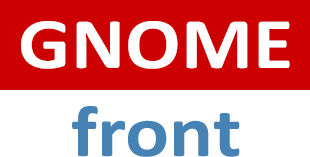
<style>
.page{position:relative;width:310px;height:157px;background:#ffffff}
.page>*{position:absolute;margin:0}
.t1{font:73.3px "Calibri-Bold";color:#ffffff;scale:1.12 1}
.t2{font:73.3px "Calibri-Bold";color:#4682b4;scale:1.12 1}
</style>
<div class="page">
<p class="t1" style="left:21px;top:21px;width:269px;height:48px">GNOME</p>
<p class="t2" style="left:72px;top:106px;width:168px;height:51px">front</p>
</div>
